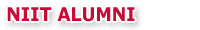
<style>
.page{position:relative;width:200px;height:30px;background:#ffffff}
.page>*{position:absolute;margin:0}
.t1{font:18.7px "Verdana-Bold";color:#c30c37;scale:0.92 1}
</style>
<div class="page">
<p class="t1" style="left:7px;top:7px;width:128px;height:15px">NIIT ALUMNI</p>
</div>
